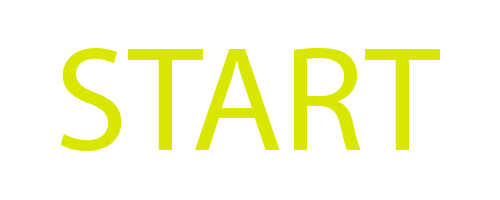
<style>
.page{position:relative;width:500px;height:200px;background:#ffffff}
.page>*{position:absolute;margin:0}
.t1{font:150px "MyriadPro-Regular";color:#d8e600}
</style>
<div class="page">
<p class="t1" style="left:60px;top:48px;width:380px;height:103px">START</p>
</div>
